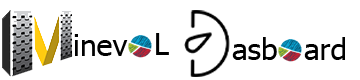
<style>
.page{position:relative;width:360px;height:80px;background:#ffffff}
.page>*{position:absolute;margin:0}
.t1{font:30px "Tahoma";color:#000000}
</style>
<div class="page">
<p class="t1" style="left:74px;top:34px;width:54px;height:22px">inev</p>
<p class="t1" style="left:156px;top:33px;width:13px;height:22px">L</p>
<p class="t1" style="left:232px;top:37px;width:45px;height:23px">asb</p>
<p class="t1" style="left:304px;top:37px;width:41px;height:23px">ard</p>
</div>
